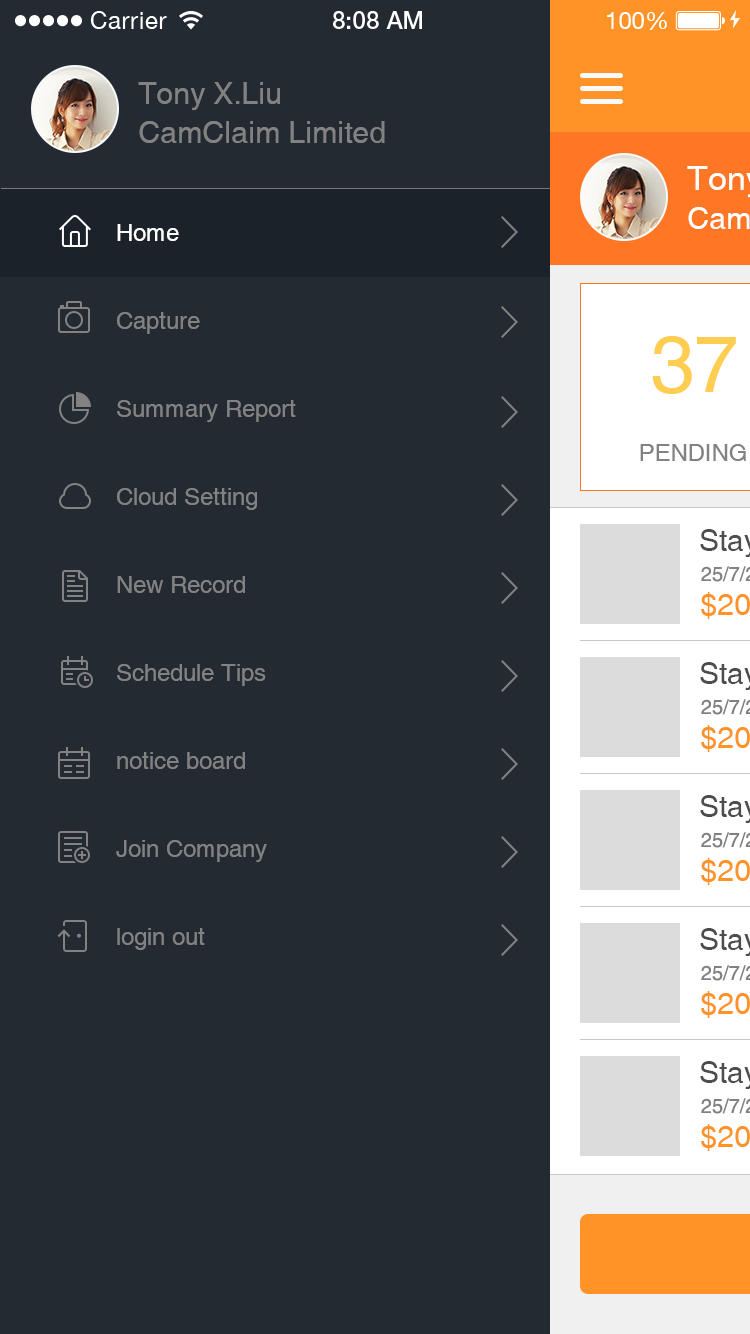
<style>
.page{position:relative;width:750px;height:1334px;background:#232a32}
.page>*{position:absolute;margin:0}
.t1{font:30px/39px "Helvetica";color:#828282}
.t2{font:24px/88px "Helvetica";color:#828282}
.t3{font:24px/88px "Helvetica";color:#ffffff}
</style>
<div class="page">
<p class="t1" style="left:138px;top:82px;width:247px;height:61px">Tony X.Liu<br>CamClaim Limited</p>
<p class="t2" style="left:116px;top:224px;width:180px;height:726px"><span class="t3">Home<br></span>Capture<br>Summary Report<br>Cloud Setting<br>New Record<br>Schedule Tips<br>notice board<br>Join Company<br>login out</p>
</div>
